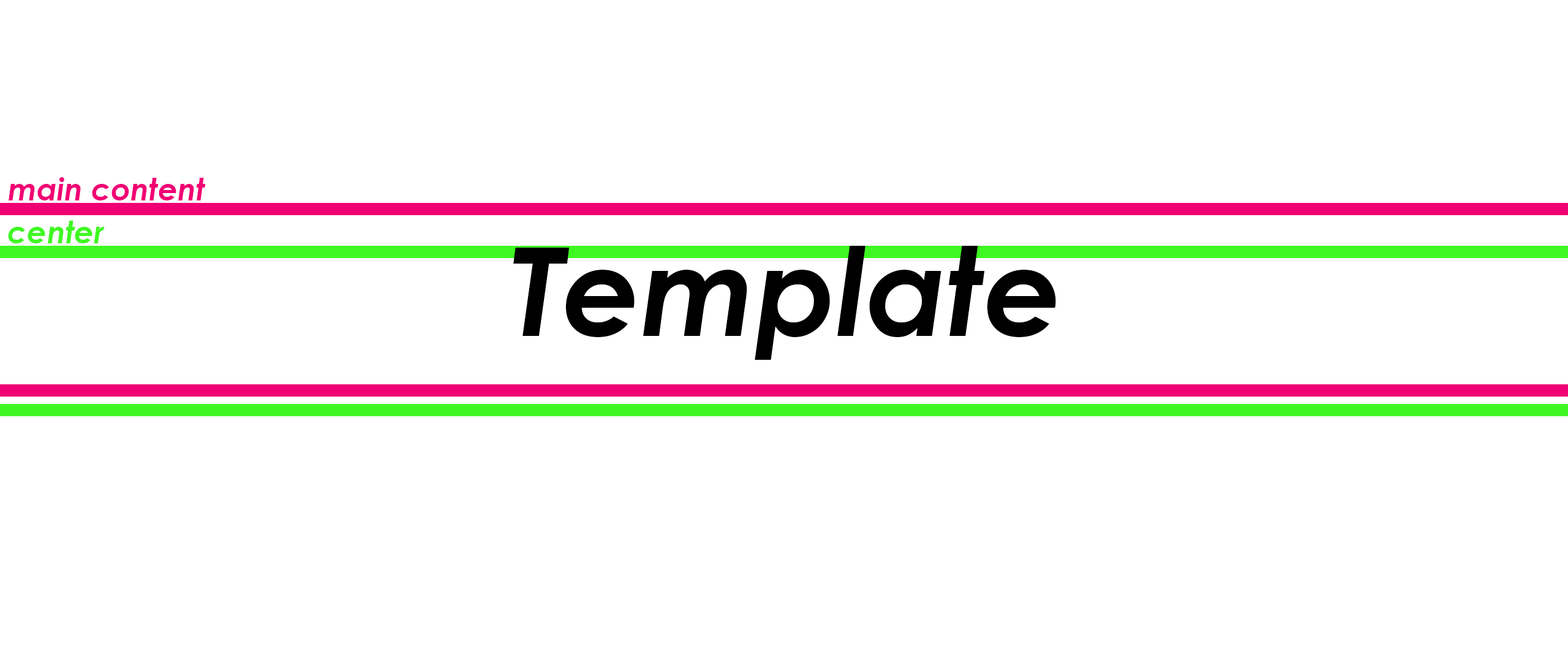
<style>
.page{position:relative;width:1568px;height:662px;background:#ffffff}
.page>*{position:absolute;margin:0}
.t1{font:30.6px "CenturyGothic-BoldItalic";color:#f10074}
.t2{font:30.6px "CenturyGothic-BoldItalic";color:#3ff823}
.t3{font:122.5px "CenturyGothic-BoldItalic";color:#000000}
</style>
<div class="page">
<p class="t1" style="left:9px;top:177px;width:197px;height:23px">main content</p>
<p class="t2" style="left:8px;top:221px;width:97px;height:22px">center</p>
<p class="t3" style="left:513px;top:246px;width:543px;height:114px">Template</p>
</div>
